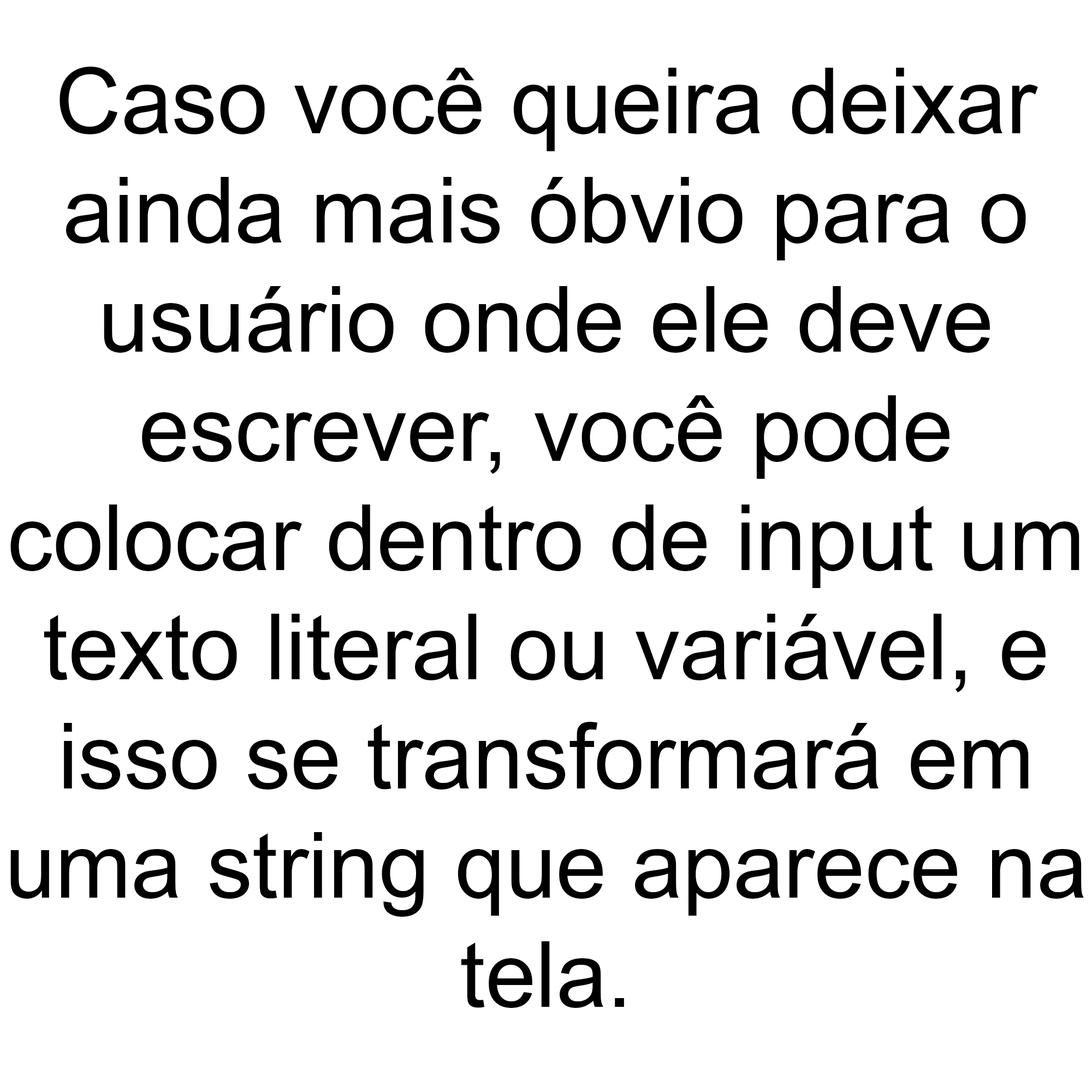
<style>
.page{position:relative;width:1092px;height:1092px;background:#ffffff}
.page>*{position:absolute;margin:0}
.t1{font:91px "ArialMT";color:#000000}
</style>
<div class="page">
<p class="t1" style="left:10px;top:67px;width:1074px;height:941px;text-align:center">Caso você queira deixar<br>ainda mais óbvio para o<br>usuário onde ele deve<br>escrever, você pode<br>colocar dentro de input um<br>texto literal ou variável, e<br>isso se transformará em<br>uma string que aparece na<br>tela.</p>
</div>
